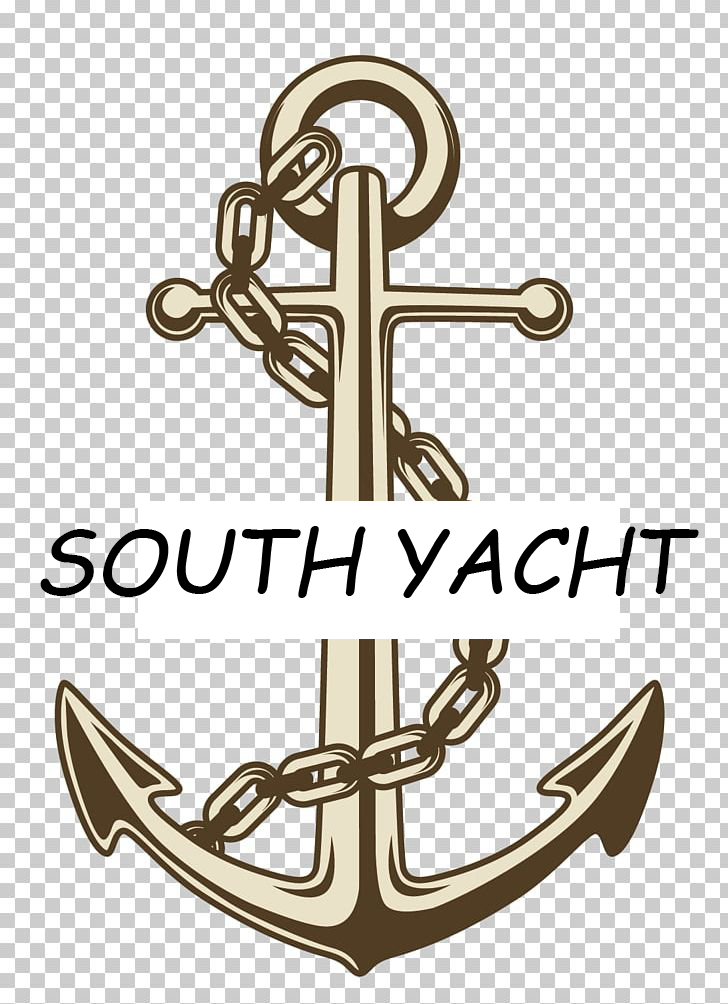
<style>
.page{position:relative;width:728px;height:1004px;background:#ffffff}
.page>*{position:absolute;margin:0}
.t1{font:88.8px "ComicSansMS-Italic";color:#000000}
</style>
<div class="page">
<p class="t1" style="left:40px;top:526px;width:659px;height:72px">SOUTH YACHT</p>
</div>
